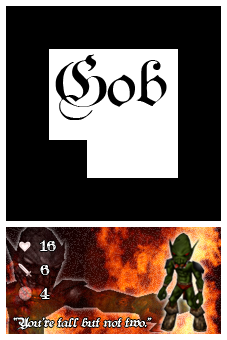
<style>
.page{position:relative;width:227px;height:340px;background:#000000}
.page>*{position:absolute;margin:0}
.t1{font:62px "TeutonicNo1-DemiBold";color:#000000}
.t2{font:16px/24px "TeutonicNo4-DemiBold";color:#fefefe}
.t3{font:12px "TeutonicNo2-DemiBold";color:#ffffff;font-style:italic}
</style>
<div class="page">
<p class="t1" style="left:55px;top:54px;width:112px;height:66px">Gob</p>
<p class="t2" style="left:40px;top:240px;width:16px;height:59px">16<br>6<br>4</p>
<p class="t3" style="left:13px;top:317px;width:139px;height:13px">“You’re tall but not two.”</p>
</div>
